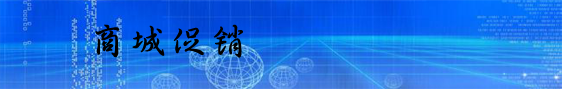
<style>
.page{position:relative;width:562px;height:89px}
.page>*{position:absolute;margin:0}
.t1{font:36px "By-JOSSQ-DMF-in-BeiJing";letter-spacing:0.1em;color:#000000;font-weight:bold}
</style>
<div class="page">
<p class="t1" style="left:95px;top:24px;width:148px;height:34px">商城促销</p>
</div>
